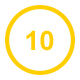
<style>
.page{position:relative;width:80px;height:80px;background:#ffffff}
.page>*{position:absolute;margin:0}
.t1{font:26.7px "Arial-BoldMT";color:#ffcd00}
</style>
<div class="page">
<p class="t1" style="left:26px;top:30px;width:28px;height:21px">10</p>
</div>
